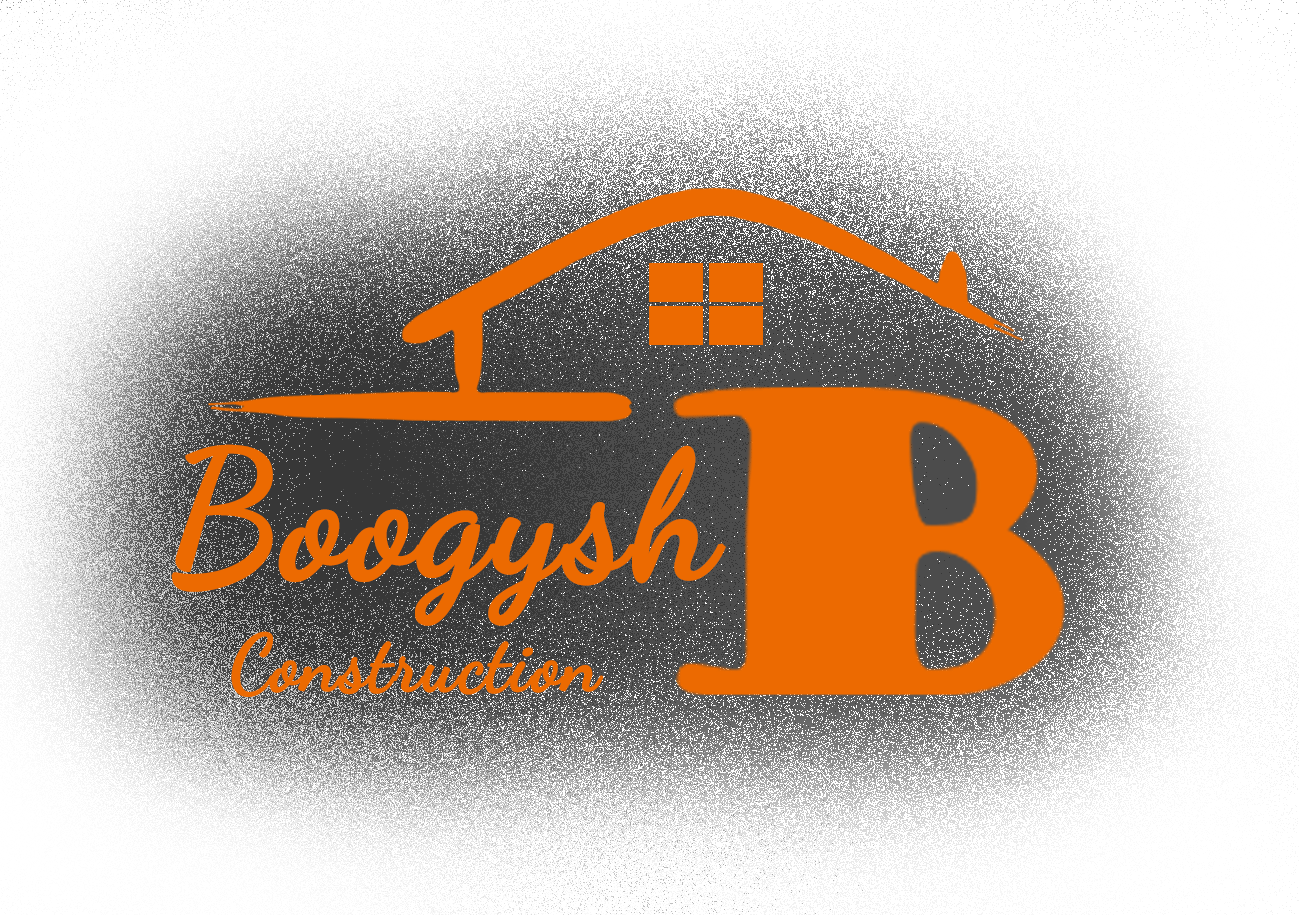
<style>
.page{position:relative;width:1299px;height:915px;background:#ffffff}
.page>*{position:absolute;margin:0}
.t1{font:176px "DancingScript";color:#ec6a01;font-weight:bold}
.t2{font:78px "DancingScript";color:#ec6a01;font-weight:bold}
</style>
<div class="page">
<p class="t1" style="left:171px;top:444px;width:555px;height:182px">Boogysh</p>
<p class="t2" style="left:231px;top:631px;width:373px;height:66px">Construction</p>
</div>
